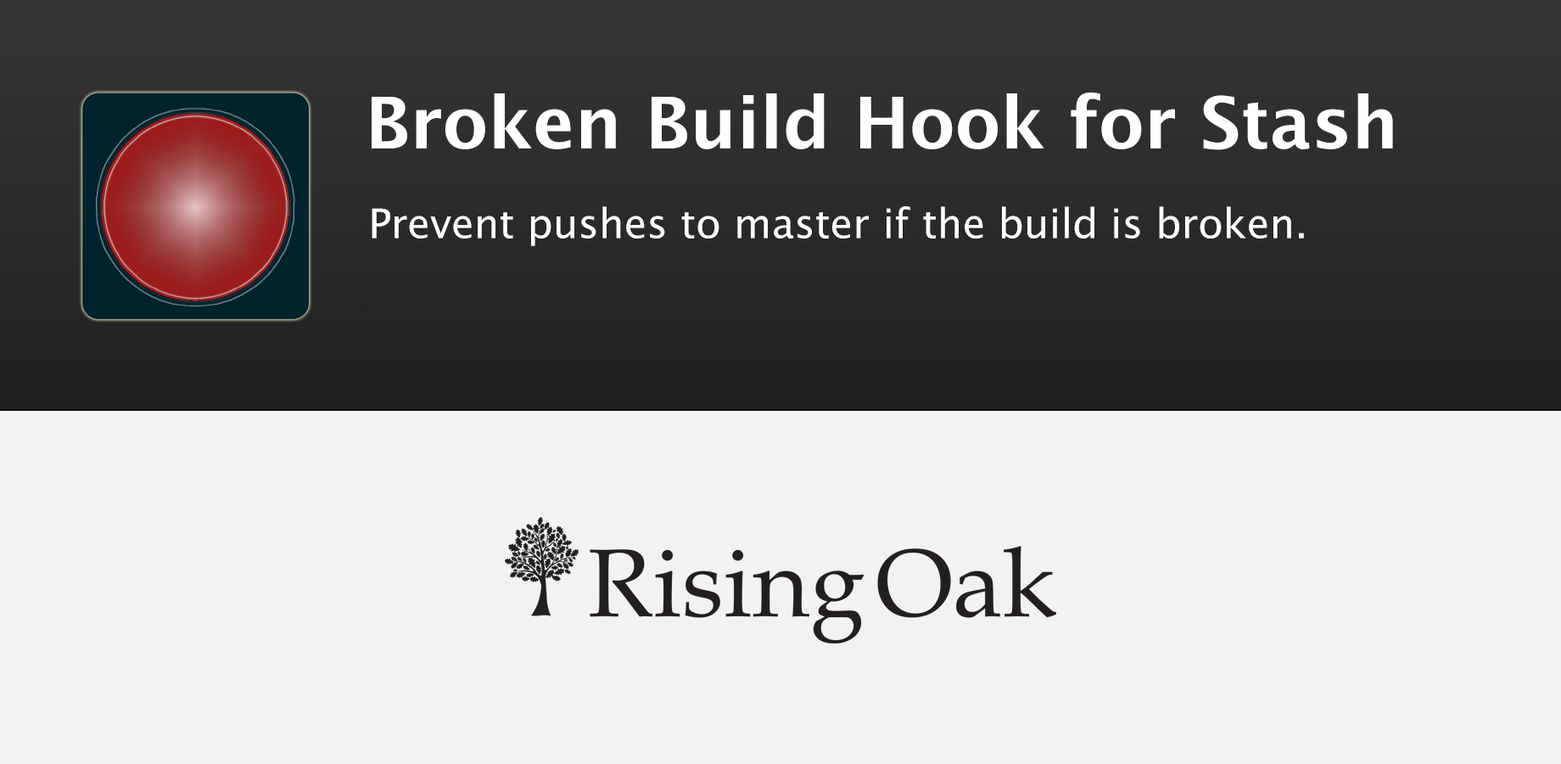
<style>
.page{position:relative;width:1561px;height:764px;background:#f2f2f2}
.page>*{position:absolute;margin:0}
.t1{font:71.3px "LucidaGrande-Bold";color:#ffffff}
.t2{font:40.7px "LucidaGrande";color:#ffffff}
</style>
<div class="page">
<p class="t1" style="left:372px;top:92px;width:1021px;height:58px">Broken Build Hook for Stash</p>
<p class="t2" style="left:372px;top:206px;width:932px;height:40px">Prevent pushes to master if the build is broken.</p>
</div>
